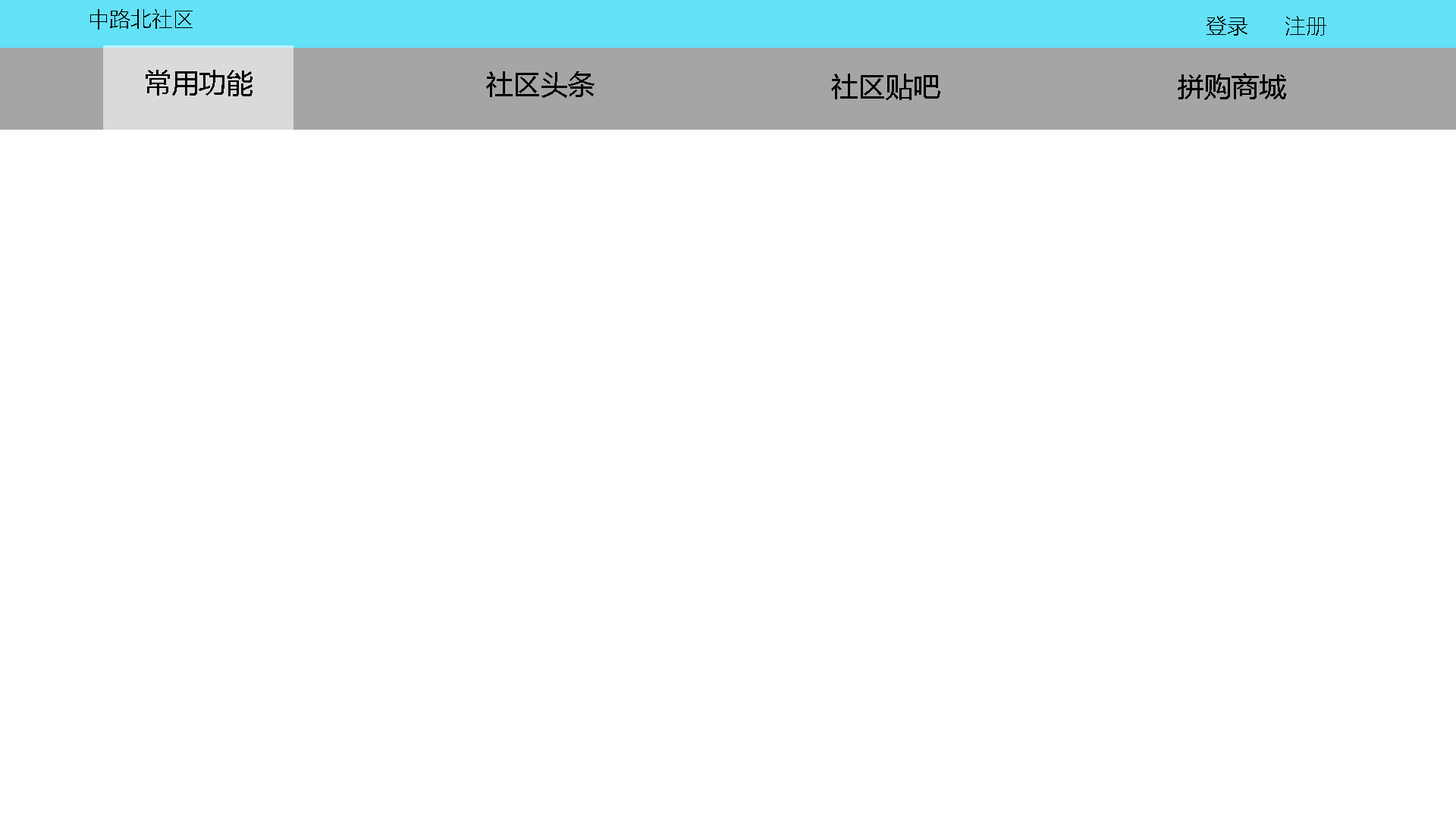
<style>
.page{position:relative;width:1456px;height:819px;background:#ffffff}
.page>*{position:absolute;margin:0}
.t1{font:21.2px "MicrosoftYaHeiLight";color:#000000}
.t2{font:27.3px "MicrosoftYaHei";color:#000000}
</style>
<div class="page">
<p class="t1" style="left:90px;top:9px;width:103px;height:21px">中路北社区</p>
<p class="t1" style="left:1206px;top:16px;width:120px;height:20px">登录      注册</p>
<p class="t2" style="left:146px;top:70px;width:107px;height:26px">常用功能</p>
<p class="t2" style="left:486px;top:71px;width:109px;height:27px">社区头条</p>
<p class="t2" style="left:831px;top:74px;width:109px;height:26px">社区贴吧</p>
<p class="t2" style="left:1178px;top:73px;width:108px;height:27px">拼购商城</p>
</div>
